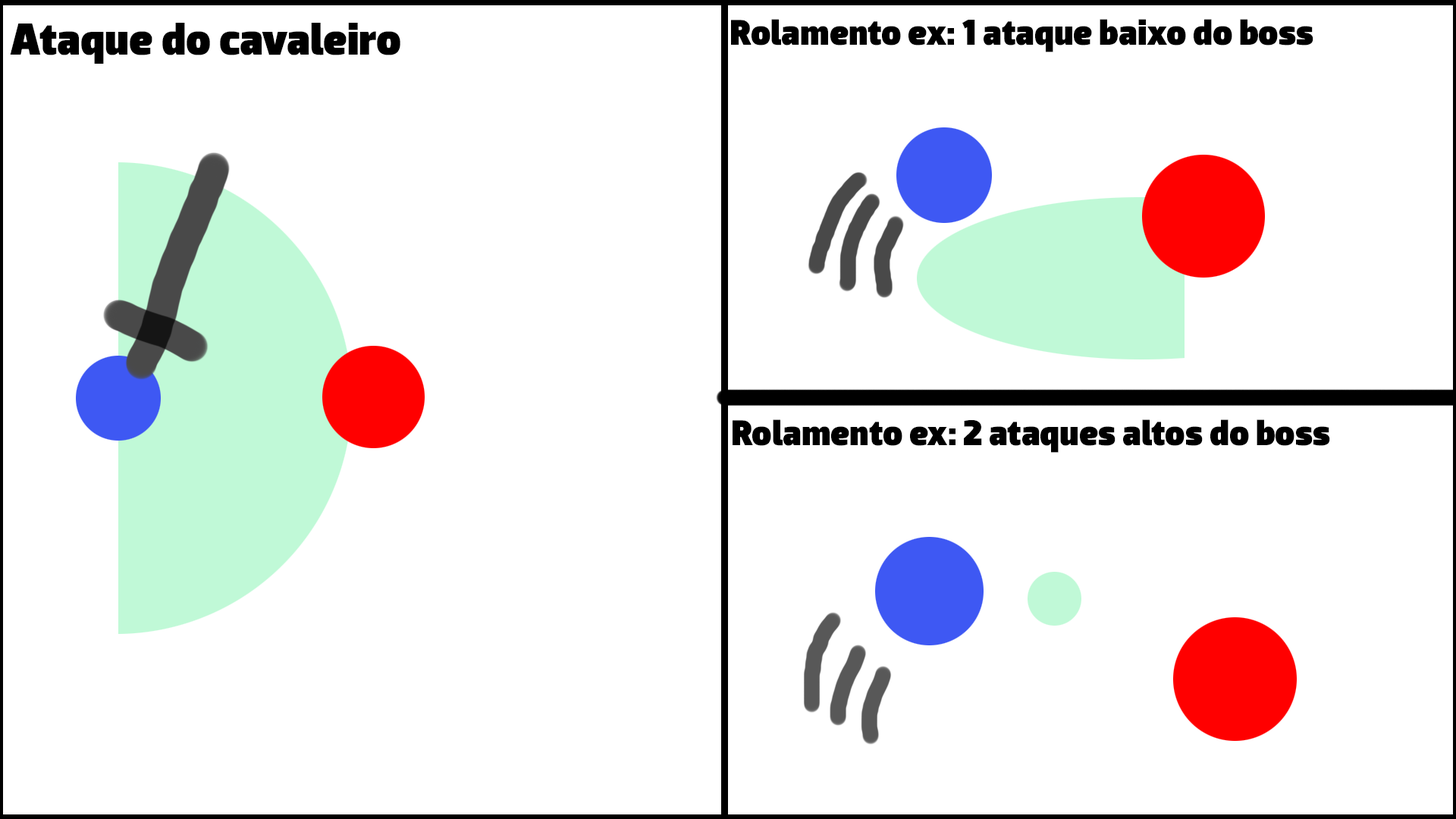
<style>
.page{position:relative;width:1456px;height:819px;background:#ffffff}
.page>*{position:absolute;margin:0}
.t1{font:45.5px "Dobra-Black";color:#000000}
.t2{font:36.4px "Dobra-Black";color:#000000}
</style>
<div class="page">
<p class="t1" style="left:10px;top:23px;width:390px;height:41px">Ataque do cavaleiro</p>
<p class="t2" style="left:731px;top:19px;width:582px;height:33px">Rolamento ex: 1 ataque baixo do boss</p>
<p class="t2" style="left:733px;top:419px;width:597px;height:34px">Rolamento ex: 2 ataques altos do boss</p>
</div>
